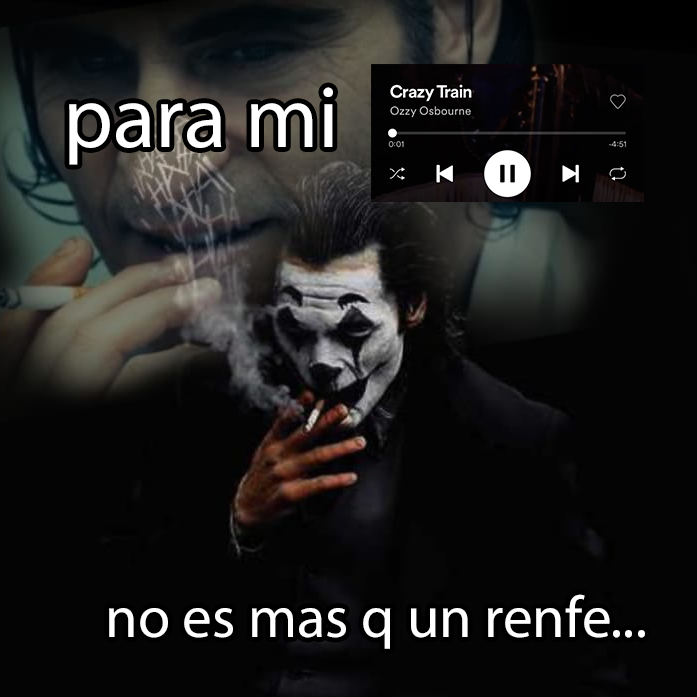
<style>
.page{position:relative;width:697px;height:697px;background:#040404}
.page>*{position:absolute;margin:0}
.t1{font:88.2px "MyriadPro-Regular";color:#ffffff}
.t2{font:58.9px "MyriadPro-Regular";color:#ffffff}
</style>
<div class="page">
<p class="t1" style="left:69px;top:87px;width:264px;height:78px">para mi</p>
<p class="t2" style="left:109px;top:594px;width:536px;height:55px">no es mas q un renfe...</p>
</div>
